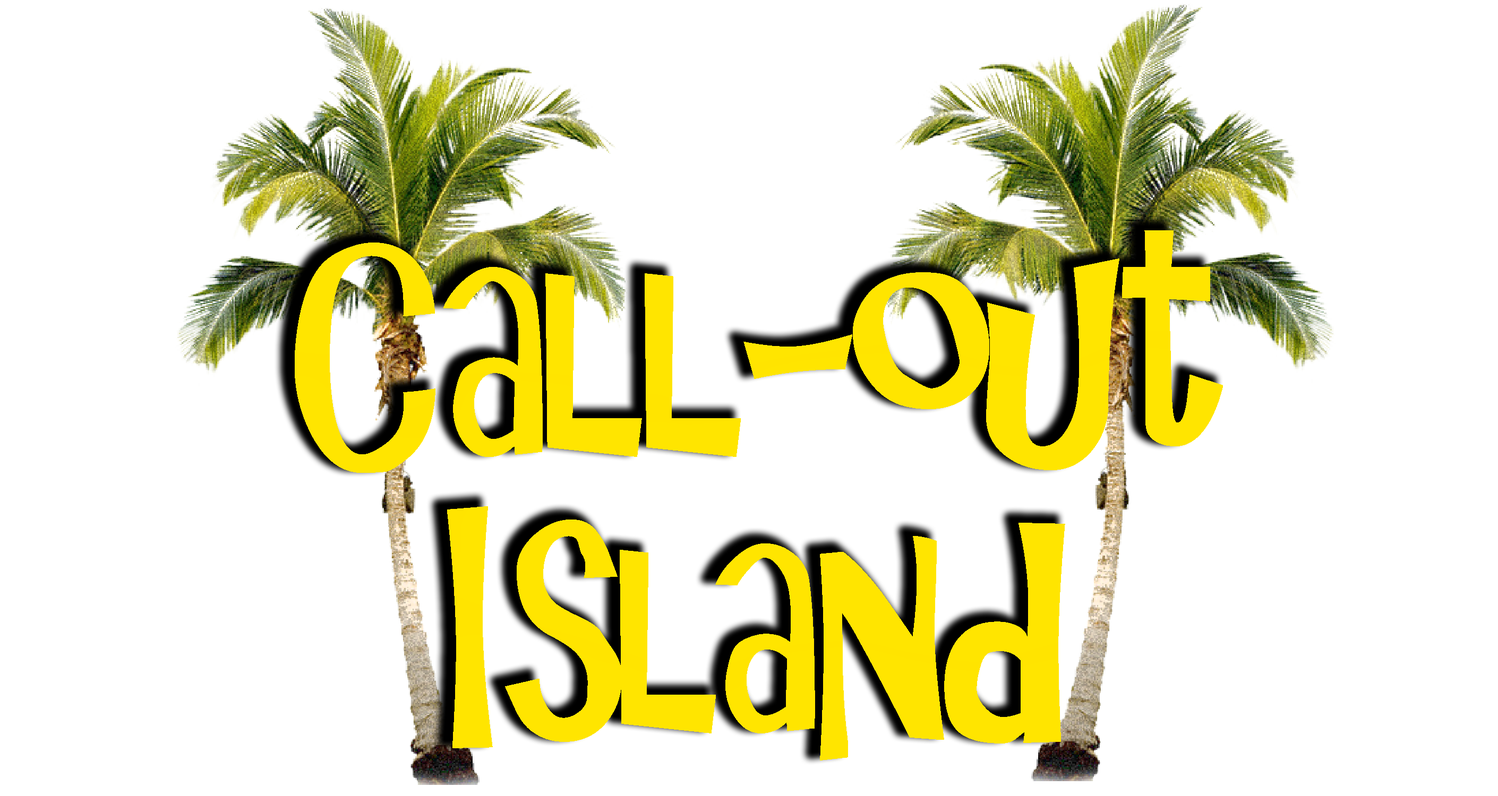
<style>
.page{position:relative;width:1498px;height:796px;background:#ffffff}
.page>*{position:absolute;margin:0}
.t1{font:298.2px/276.5px "GilligansIsland";letter-spacing:-0.04em;color:#ffee00;scale:0.93 1}
</style>
<div class="page">
<p class="t1" style="left:295px;top:230px;width:928px;height:531px;text-align:center">Call-out <br>Island</p>
</div>
